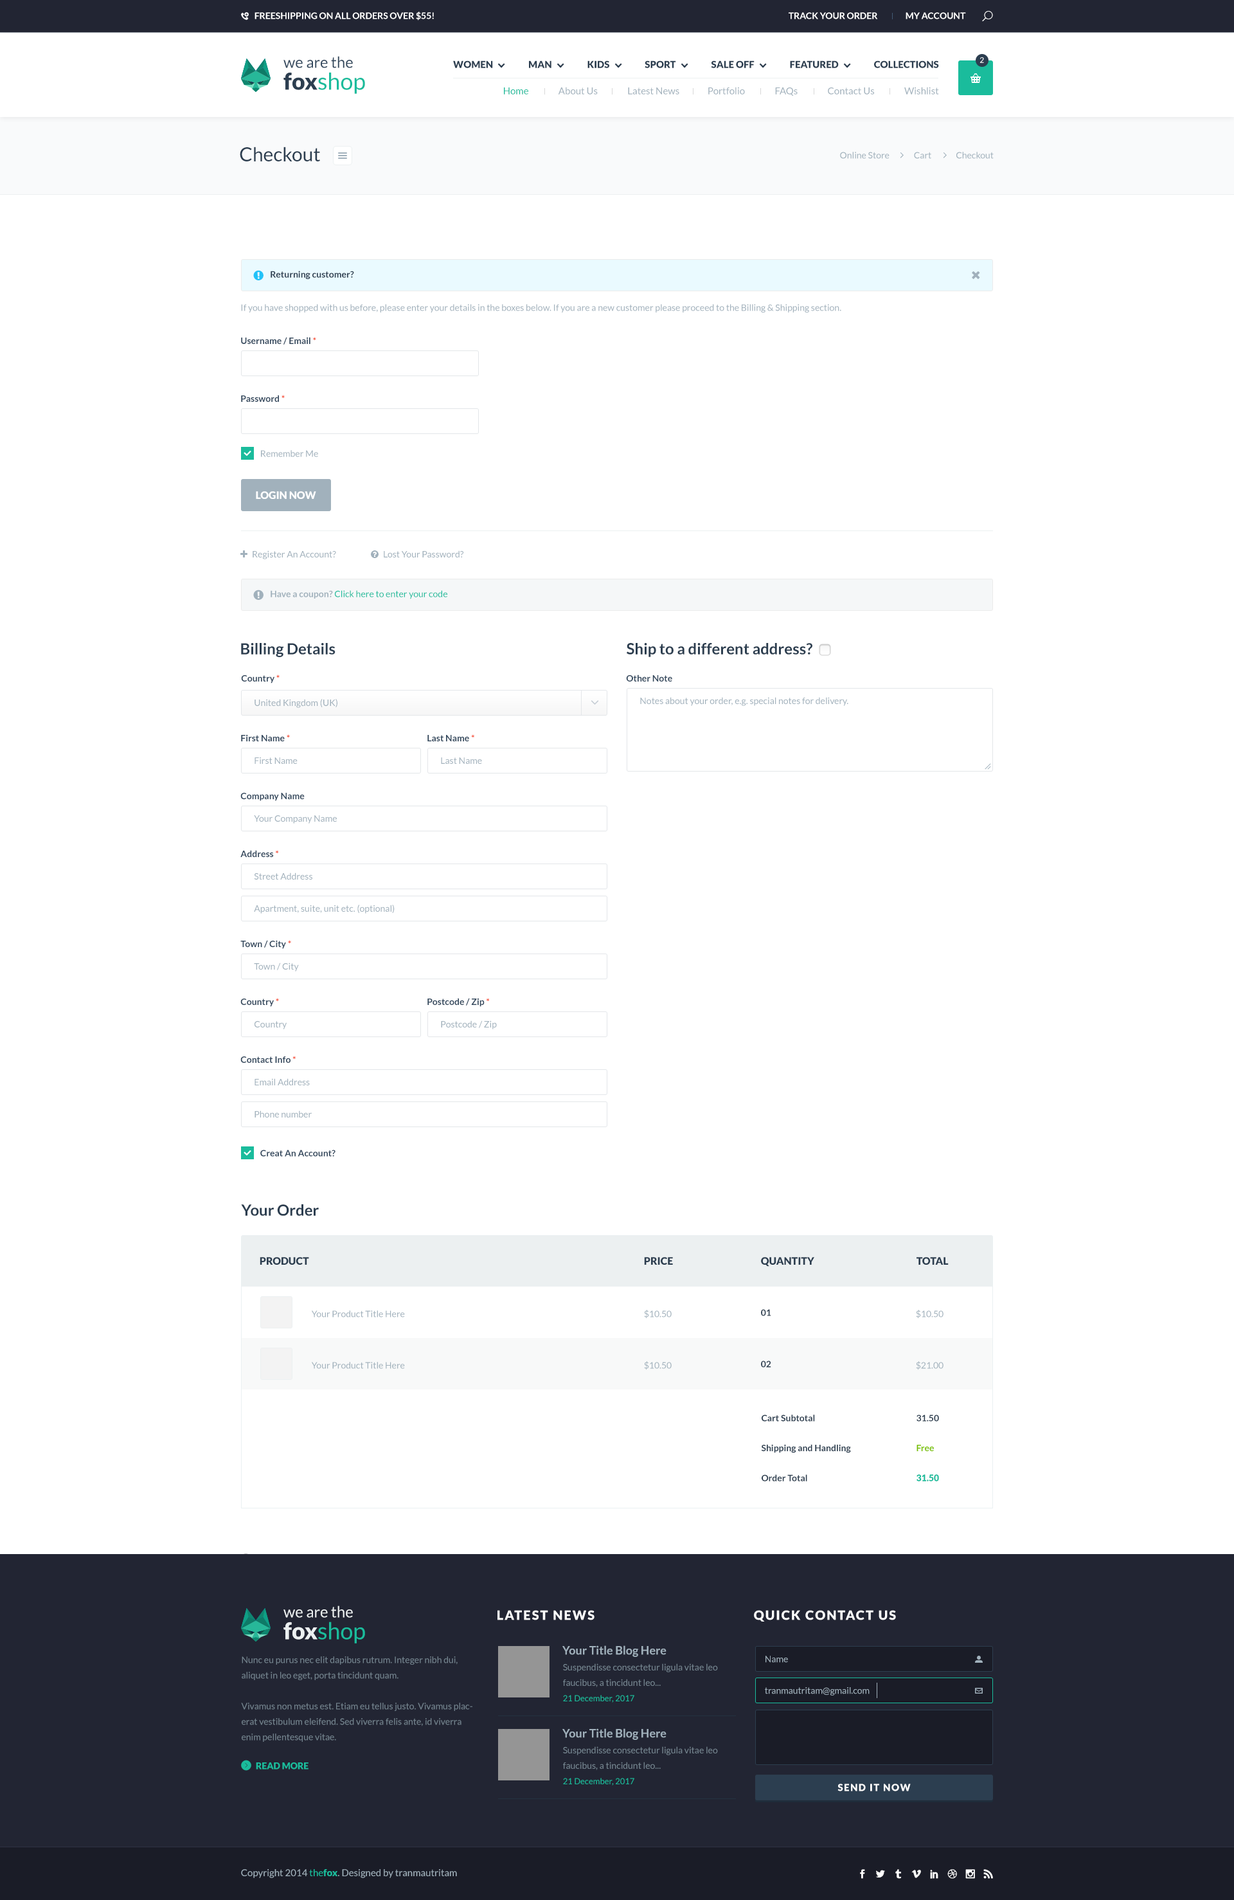
<style>
.page{position:relative;width:1234px;height:1900px;background:#ffffff}
.page>*{position:absolute;margin:0}
.t1{font:9px "Lato-Bold";color:#ffffff}
.t2{font:15.4px/21.9px "Lato-Regular";color:#34495e}
.t3{font:23.1px/21.9px "Lato-Black";color:#2c3e50}
.t4{font:23.1px/21.9px "Lato-Regular";color:#1abc9c}
.t5{font:9.6px "Lato-Black";color:#2c3e50;text-transform:uppercase}
.t6{font:7.7px "Lato-Regular";color:#ffffff}
.t7{font:9.6px "Lato-Regular";color:#a1b1bc}
.t8{font:9.6px "Lato-Regular";color:#1abc9c}
.t9{font:19.3px "Lato-Regular";color:#2c3e50}
.t10{font:9px "Lato-Regular";color:#a1b1bc}
.t11{font:9px "Lato-Bold";color:#2c3e50}
.t12{font:9px "Lato-Bold";color:#34495e}
.t13{font:9px "Lato-Bold";color:#f54e33}
.t14{font:10.3px "Lato-Black";color:#ffffff}
.t15{font:9px "Lato-Regular";color:#1abc9c}
.t16{font:9px "Lato-Bold";color:#a1b1bc}
.t17{font:15.4px "Lato-Bold";color:#2c3e50}
.t18{font:10.3px "Lato-Black";color:#2c3e50}
.t19{font:9px/29.9px "Lato-Bold";color:#2c3e50}
.t20{font:9px/29.9px "Lato-Bold";color:#7bc200}
.t21{font:9px/29.9px "Lato-Black";color:#1abc9c}
.t22{font:15.4px/21.9px "Lato-Regular";color:#ecf0f1}
.t23{font:23.1px/21.9px "Lato-Black";color:#ecf0f1}
.t24{font:12.9px "Lato-Black";letter-spacing:0.1em;color:#ffffff;text-transform:uppercase}
.t25{font:11.6px "Lato-Bold";color:#a1b1bc}
.t26{font:9px/15.4px "Lato-Regular";color:#758590}
.t27{font:8.4px/15.4px "Lato-Regular";color:#1abc9c}
.t28{font:9px "Lato-Black";color:#1abc9c}
.t29{font:9.6px "Lato-Black";letter-spacing:0.1em;color:#ffffff}
.t30{font:9.6px "Lato-Black";color:#1abc9c}
</style>
<div class="page">
<p class="t1" style="left:255px;top:12px;width:179px;height:9px">FREESHIPPING ON ALL ORDERS OVER $55!</p>
<p class="t1" style="left:789px;top:12px;width:177px;height:7px">TRACK YOUR ORDER                MY ACCOUNT</p>
<p class="t2" style="left:284px;top:56px;width:81px;height:38px">we are the<br><span class="t3">fox</span><span class="t4">shop</span></p>
<p class="t5" style="left:453px;top:60px;width:486px;height:8px">Women                   Man                   KIDS                   SPORT                   Sale Off                   FEATURED                   COLLECTIONS</p>
<p class="t6" style="left:980px;top:57px;width:4px;height:6px">2</p>
<p class="t7" style="left:504px;top:87px;width:435px;height:9px"><span class="t8">Home</span>                About Us                Latest News               Portfolio                FAQs                Contact Us                Wishlist</p>
<p class="t9" style="left:240px;top:147px;width:80px;height:14px">Checkout</p>
<p class="t10" style="left:840px;top:152px;width:154px;height:7px">Online Store              Cart              Checkout</p>
<p class="t11" style="left:271px;top:271px;width:83px;height:8px">Returning customer?</p>
<p class="t10" style="left:241px;top:304px;width:601px;height:8px">If you have shopped with us before, please enter your details in the boxes below. If you are a new customer please proceed to the Billing &amp; Shipping section.</p>
<p class="t12" style="left:241px;top:337px;width:75px;height:8px">Username / Email <span class="t13">*</span></p>
<p class="t12" style="left:241px;top:395px;width:44px;height:7px">Password <span class="t13">*</span></p>
<p class="t10" style="left:261px;top:450px;width:57px;height:7px">Remember Me</p>
<p class="t14" style="left:256px;top:491px;width:60px;height:8px">LOGIN NOW</p>
<p class="t15" style="left:271px;top:590px;width:176px;height:9px"><span class="t16">Have a coupon? </span>Click here to enter your code</p>
<p class="t17" style="left:241px;top:643px;width:95px;height:14px">Billing Details</p>
<p class="t17" style="left:627px;top:643px;width:186px;height:14px">Ship to a different address?</p>
<p class="t12" style="left:241px;top:674px;width:39px;height:9px">Country <span class="t13">*</span></p>
<p class="t12" style="left:626px;top:674px;width:46px;height:7px">Other Note</p>
<p class="t10" style="left:255px;top:699px;width:83px;height:9px">United Kingdom (UK)</p>
<p class="t10" style="left:640px;top:697px;width:209px;height:9px">Notes about your order, e.g. special notes for delivery.</p>
<p class="t12" style="left:241px;top:734px;width:49px;height:7px">First Name <span class="t13">*</span></p>
<p class="t12" style="left:428px;top:734px;width:46px;height:7px">Last Name <span class="t13">*</span></p>
<p class="t10" style="left:255px;top:757px;width:43px;height:7px">First Name</p>
<p class="t10" style="left:441px;top:757px;width:41px;height:7px">Last Name</p>
<p class="t12" style="left:240px;top:793px;width:65px;height:8px">Company Name</p>
<p class="t10" style="left:254px;top:815px;width:83px;height:9px">Your Company Name</p>
<p class="t12" style="left:240px;top:850px;width:39px;height:7px">Address <span class="t13">*</span></p>
<p class="t10" style="left:254px;top:872px;width:58px;height:7px">Street Address</p>
<p class="t10" style="left:254px;top:905px;width:141px;height:9px">Apartment, suite, unit etc. (optional)</p>
<p class="t12" style="left:240px;top:940px;width:51px;height:9px">Town / City <span class="t13">*</span></p>
<p class="t10" style="left:254px;top:962px;width:45px;height:9px">Town / City</p>
<p class="t12" style="left:240px;top:998px;width:39px;height:9px">Country <span class="t13">*</span></p>
<p class="t12" style="left:428px;top:998px;width:62px;height:9px">Postcode / Zip <span class="t13">*</span></p>
<p class="t10" style="left:255px;top:1021px;width:32px;height:8px">Country</p>
<p class="t10" style="left:441px;top:1020px;width:56px;height:9px">Postcode / Zip</p>
<p class="t12" style="left:240px;top:1056px;width:56px;height:7px">Contact Info <span class="t13">*</span></p>
<p class="t10" style="left:255px;top:1078px;width:55px;height:7px">Email Address</p>
<p class="t10" style="left:255px;top:1110px;width:57px;height:7px">Phone number</p>
<p class="t12" style="left:260px;top:1149px;width:76px;height:7px">Creat An Account?</p>
<p class="t17" style="left:241px;top:1204px;width:78px;height:12px">Your Order</p>
<p class="t18" style="left:260px;top:1257px;width:49px;height:7px">PRODUCT</p>
<p class="t18" style="left:644px;top:1257px;width:29px;height:7px">PRICE</p>
<p class="t18" style="left:761px;top:1257px;width:54px;height:9px">QUANTITY</p>
<p class="t18" style="left:917px;top:1257px;width:32px;height:7px">TOTAL</p>
<p class="t10" style="left:312px;top:1310px;width:93px;height:7px">Your Product Title Here</p>
<p class="t10" style="left:644px;top:1310px;width:28px;height:8px">$10.50</p>
<p class="t11" style="left:761px;top:1309px;width:10px;height:7px">01</p>
<p class="t10" style="left:916px;top:1310px;width:28px;height:8px">$10.50</p>
<p class="t10" style="left:312px;top:1362px;width:93px;height:7px">Your Product Title Here</p>
<p class="t10" style="left:644px;top:1361px;width:28px;height:9px">$10.50</p>
<p class="t11" style="left:761px;top:1360px;width:10px;height:7px">02</p>
<p class="t10" style="left:916px;top:1361px;width:28px;height:9px">$21.00</p>
<p class="t19" style="left:761px;top:1414px;width:90px;height:67px">Cart Subtotal<br>Shipping and Handling<br>Order Total</p>
<p class="t19" style="left:917px;top:1414px;width:22px;height:67px">31.50<br><span class="t20">Free<br></span><span class="t21">31.50</span></p>
<p class="t22" style="left:284px;top:1605px;width:81px;height:38px">we are the<br><span class="t23">fox</span><span class="t4">shop</span></p>
<p class="t24" style="left:498px;top:1610px;width:97px;height:10px">Latest News</p>
<p class="t24" style="left:754px;top:1610px;width:142px;height:11px">quick contact us</p>
<p class="t25" style="left:562px;top:1645px;width:105px;height:12px">Your Title Blog Here</p>
<p class="t26" style="left:241px;top:1656px;width:232px;height:86px">Nunc eu purus nec elit dapibus rutrum. Integer nibh dui, aliquet in leo eget, porta tincidunt quam. <br><br>Vivamus non metus est. Etiam eu tellus justo. Vivamus placerat vestibulum eleifend. Sed viverra felis ante, id viverra enim pellentesque vitae.</p>
<p class="t10" style="left:766px;top:1655px;width:22px;height:7px">Name</p>
<p class="t26" style="left:563px;top:1663px;width:155px;height:39px">Suspendisse consectetur ligula vitae leo faucibus, a tincidunt leo...<br><span class="t27">21 December, 2017</span></p>
<p class="t10" style="left:765px;top:1687px;width:105px;height:8px">tranmautritam@gmail.com</p>
<p class="t25" style="left:562px;top:1728px;width:105px;height:12px">Your Title Blog Here</p>
<p class="t26" style="left:563px;top:1746px;width:155px;height:39px">Suspendisse consectetur ligula vitae leo faucibus, a tincidunt leo...<br><span class="t27">21 December, 2017</span></p>
<p class="t28" style="left:256px;top:1762px;width:53px;height:7px">READ MORE</p>
<p class="t29" style="left:838px;top:1783px;width:73px;height:8px">SEND IT NOW</p>
<p class="t7" style="left:241px;top:1869px;width:216px;height:9px">Copyright 2014 <span class="t8">the</span><span class="t30">fox</span>. Designed by tranmautritam</p>
</div>
